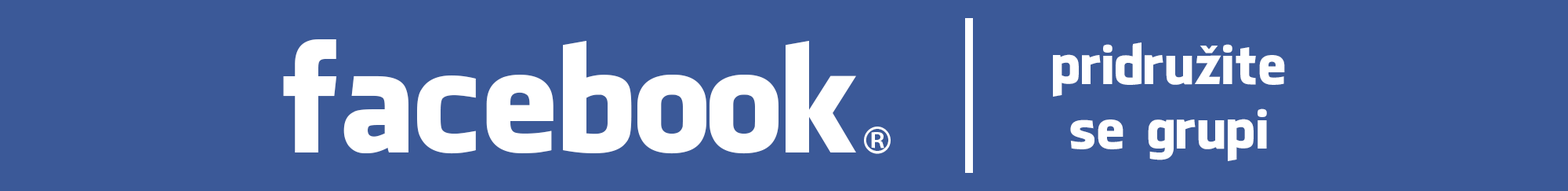
<style>
.page{position:relative;width:1568px;height:191px;background:#3b5998}
.page>*{position:absolute;margin:0}
.t1{font:143.4px "FacebookLetterFaces";color:#ffffff}
.t2{font:53.4px "FacebookLetterFaces";color:#ffffff}
.t3{font:61.1px "FacebookLetterFaces";color:#ffffff}
</style>
<div class="page">
<p class="t1" style="left:283px;top:39px;width:573px;height:115px">facebook</p>
<p class="t2" style="left:1053px;top:42px;width:232px;height:119px;text-align:center">pridružite<br>se grupi</p>
<p class="t3" style="left:864px;top:126px;width:27px;height:28px">®</p>
</div>
